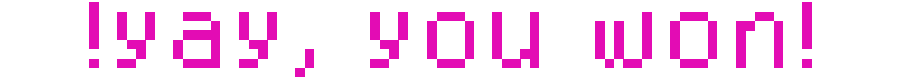
<style>
.page{position:relative;width:900px;height:77px;background:#ffffff}
.page>*{position:absolute;margin:0}
.t1{font:75px "Dogica_Pixel";color:#e30cb4}
</style>
<div class="page">
<p class="t1" style="left:89px;top:2px;width:723px;height:75px">!yay, you won!</p>
</div>
